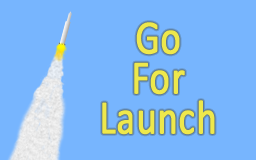
<style>
.page{position:relative;width:256px;height:160px;background:#77b5fe}
.page>*{position:absolute;margin:0}
.t1{font:48px/40px "Calibri";color:#eee84c;font-weight:bold;scale:0.8 1}
</style>
<div class="page">
<p class="t1" style="left:102px;top:22px;width:113px;height:113px;text-align:center">Go<br>For<br>Launch</p>
</div>
